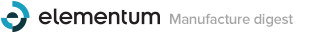
<style>
.page{position:relative;width:324px;height:35px;background:#ffffff}
.page>*{position:absolute;margin:0}
.t1{font:15px "ProximaNova-Semibold";letter-spacing:-0.022em;color:#a6a5a5}
</style>
<div class="page">
<p class="t1" style="left:170px;top:13px;width:123px;height:14px">Manufacture digest</p>
</div>
